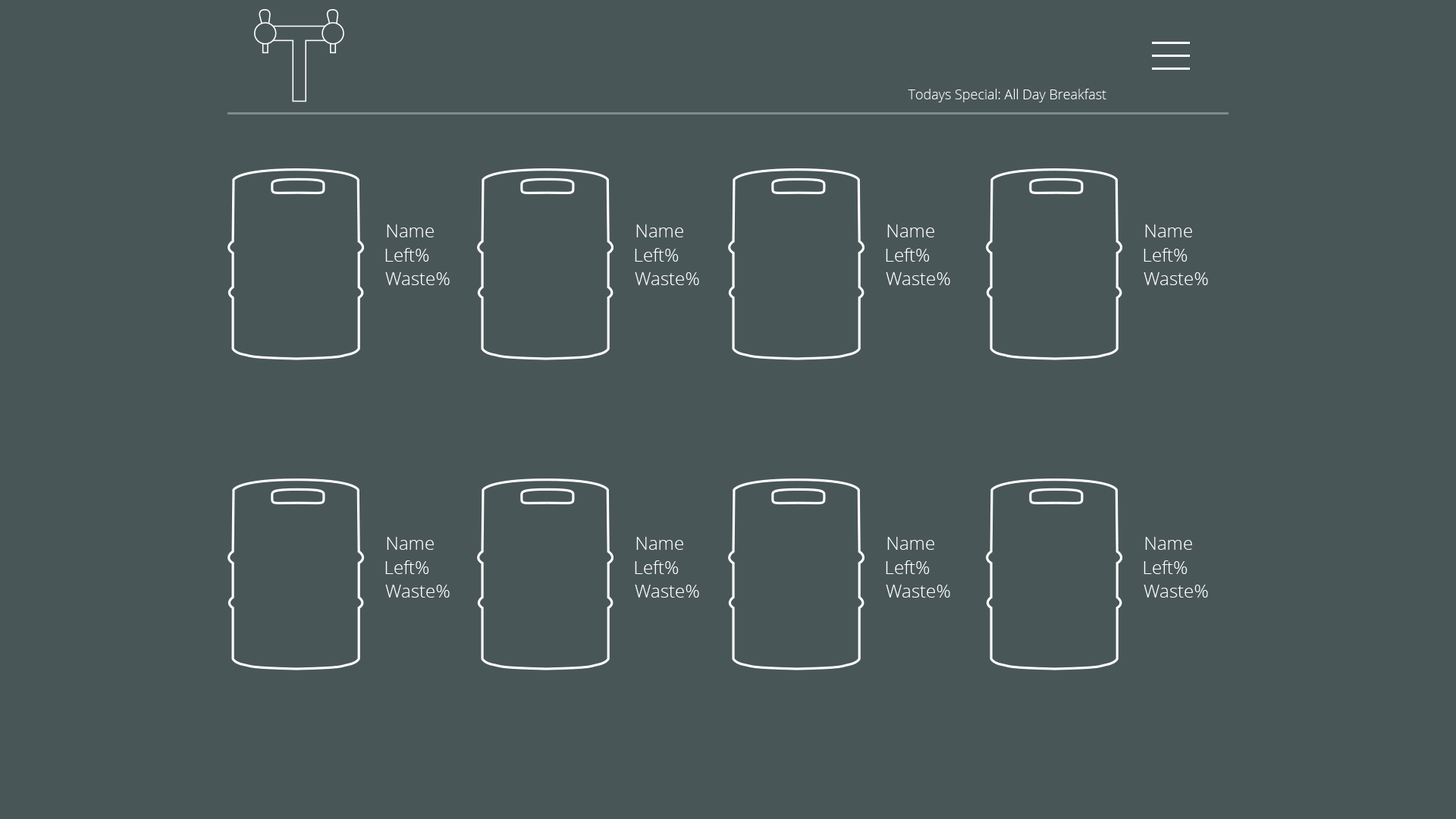
<style>
.page{position:relative;width:1456px;height:819px;background:#495658}
.page>*{position:absolute;margin:0}
.t1{font:13.6px "OpenSans-Light";color:#ffffff}
.t2{font:18.2px "OpenSans-Light";color:#ffffff}
</style>
<div class="page">
<p class="t1" style="left:908px;top:89px;width:198px;height:13px">Todays Special: All Day Breakfast</p>
<p class="t2" style="left:387px;top:224px;width:47px;height:13px">Name</p>
<p class="t2" style="left:636px;top:224px;width:47px;height:13px">Name</p>
<p class="t2" style="left:887px;top:224px;width:47px;height:13px">Name</p>
<p class="t2" style="left:1145px;top:224px;width:47px;height:13px">Name</p>
<p class="t2" style="left:385px;top:248px;width:44px;height:14px">Left%</p>
<p class="t2" style="left:635px;top:248px;width:44px;height:14px">Left%</p>
<p class="t2" style="left:886px;top:248px;width:44px;height:14px">Left%</p>
<p class="t2" style="left:1144px;top:248px;width:44px;height:14px">Left%</p>
<p class="t2" style="left:385px;top:272px;width:65px;height:13px">Waste%</p>
<p class="t2" style="left:635px;top:272px;width:64px;height:13px">Waste%</p>
<p class="t2" style="left:886px;top:272px;width:64px;height:13px">Waste%</p>
<p class="t2" style="left:1144px;top:272px;width:64px;height:13px">Waste%</p>
<p class="t2" style="left:387px;top:537px;width:47px;height:13px">Name</p>
<p class="t2" style="left:636px;top:537px;width:47px;height:13px">Name</p>
<p class="t2" style="left:887px;top:537px;width:47px;height:13px">Name</p>
<p class="t2" style="left:1145px;top:537px;width:47px;height:13px">Name</p>
<p class="t2" style="left:385px;top:560px;width:44px;height:14px">Left%</p>
<p class="t2" style="left:635px;top:560px;width:44px;height:14px">Left%</p>
<p class="t2" style="left:886px;top:560px;width:44px;height:14px">Left%</p>
<p class="t2" style="left:1144px;top:560px;width:44px;height:14px">Left%</p>
<p class="t2" style="left:385px;top:585px;width:65px;height:13px">Waste%</p>
<p class="t2" style="left:635px;top:585px;width:64px;height:13px">Waste%</p>
<p class="t2" style="left:886px;top:585px;width:64px;height:13px">Waste%</p>
<p class="t2" style="left:1144px;top:585px;width:64px;height:13px">Waste%</p>
</div>
